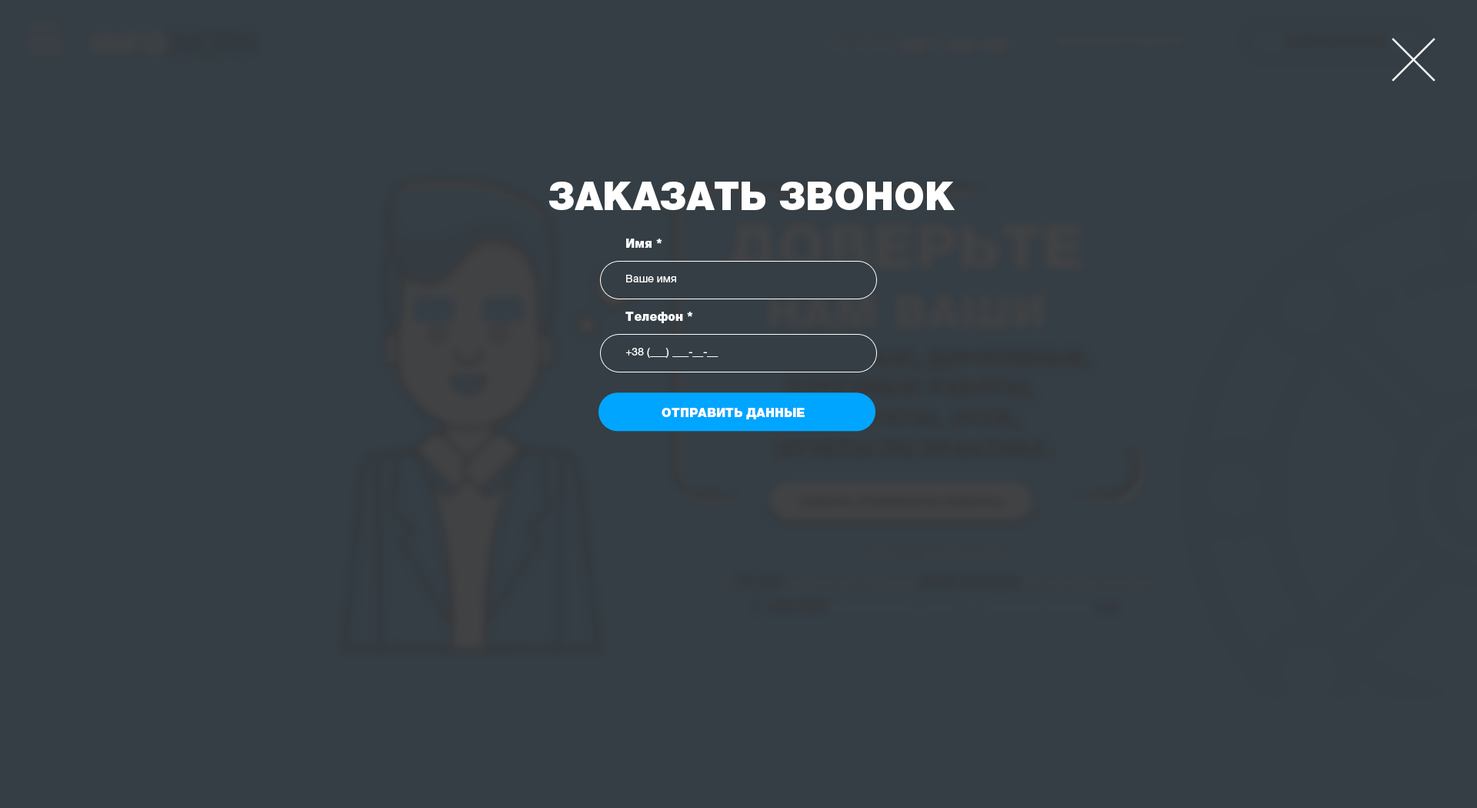
<style>
.page{position:relative;width:1477px;height:808px;background:#343e44}
.page>*{position:absolute;margin:0}
.t1{font:38.5px "HelveticaNeueCyr-Black";color:#ffffff}
.t2{font:12.3px "HelveticaNeueCyr-Black";color:#ffffff}
.t3{font:10.8px "HelveticaNeueCyr-Roman";color:#ffffff}
</style>
<div class="page">
<p class="t1" style="left:548px;top:182px;width:407px;height:28px">ЗАКАЗАТЬ ЗВОНОК</p>
<p class="t2" style="left:626px;top:238px;width:36px;height:10px">Имя *</p>
<p class="t3" style="left:626px;top:275px;width:50px;height:7px">Ваше имя</p>
<p class="t2" style="left:625px;top:311px;width:68px;height:12px">Телефон *</p>
<p class="t3" style="left:625px;top:348px;width:93px;height:10px">+38 (___) ___-__-__</p>
<p class="t2" style="left:661px;top:408px;width:143px;height:11px">ОТПРАВИТЬ ДАННЫЕ</p>
</div>
